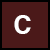
<style>
.page{position:relative;width:50px;height:50px;background:#4b1919}
.page>*{position:absolute;margin:0}
.t1{font:24px "H2gtrE";color:#ffffff}
</style>
<div class="page">
<p class="t1" style="left:14px;top:15px;width:17px;height:19px">C</p>
</div>
